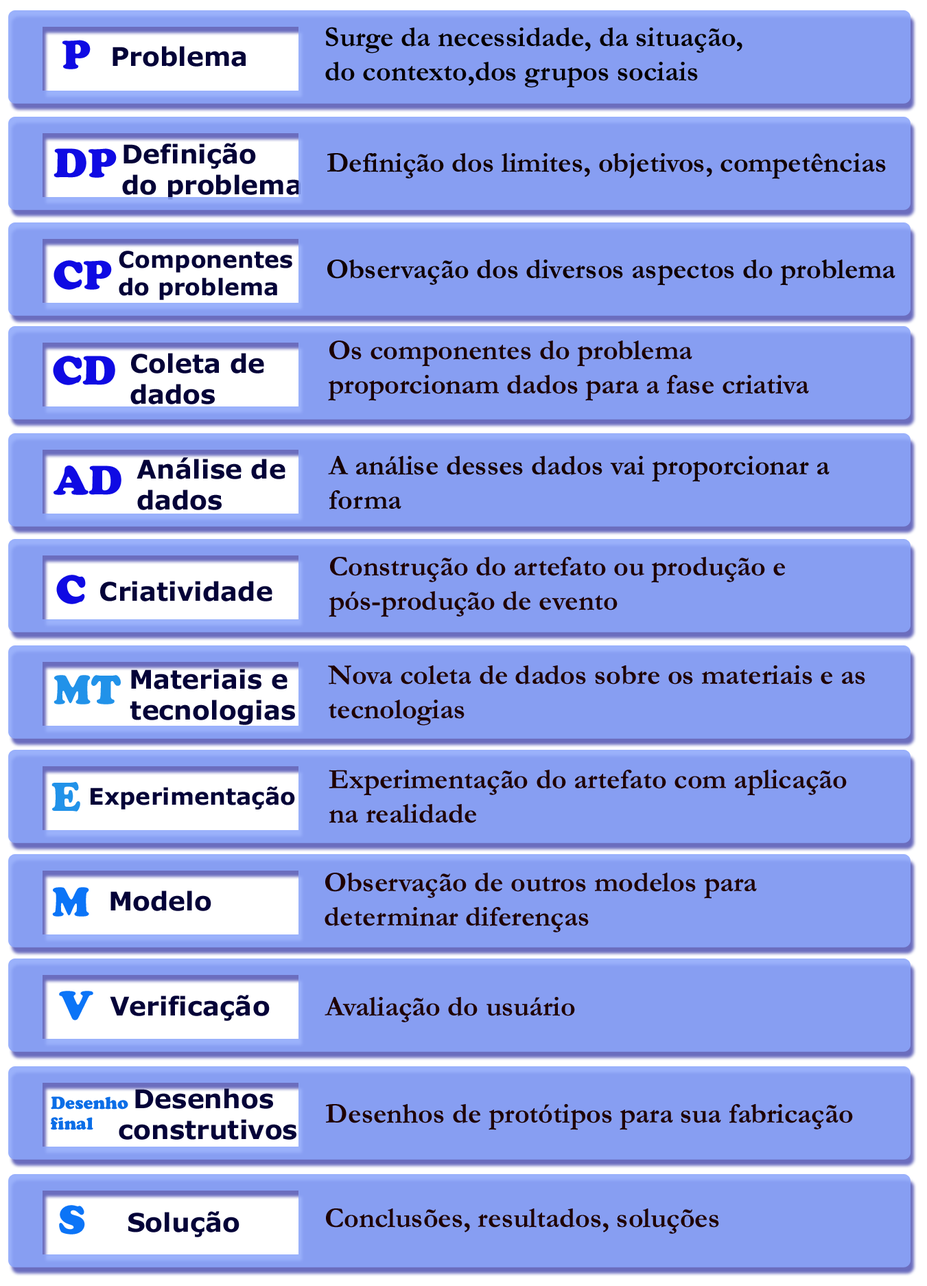
<style>
.page{position:relative;width:927px;height:1286px;background:#879ef2}
.page>*{position:absolute;margin:0}
.t1{font:28.6px "Garamond-Bold";color:#060000}
.t2{font:40px "CooperBlackStd";color:#0f0ae3}
.t3{font:25.7px "Verdana-Bold";color:#040238}
.t4{font:28.6px "Garamond-Bold";color:#120101}
.t5{font:22.9px "Verdana-Bold";color:#040238}
.t6{font:28.6px "Garamond-Bold";color:#100101}
.t7{font:28.6px "Garamond-Bold";color:#1c0101}
.t8{font:28.6px "Garamond-Bold";color:#160101}
.t9{font:28.6px "Garamond-Bold";color:#1f0202}
.t10{font:40px "CooperBlackStd";color:#2192e9}
.t11{font:40px "CooperBlackStd";color:#0b74f7}
.t12{font:17.2px "CooperBlackStd";color:#0b6ee7}
</style>
<div class="page">
<p class="t1" style="left:325px;top:27px;width:418px;height:61px">Surge da necessidade, da situação, <br>do contexto,dos grupos sociais</p>
<p class="t2" style="left:62px;top:40px;width:29px;height:29px">P</p>
<p class="t3" style="left:113px;top:46px;width:133px;height:21px">Problema</p>
<p class="t2" style="left:54px;top:148px;width:63px;height:30px">DP</p>
<p class="t3" style="left:122px;top:143px;width:179px;height:57px">Definição <br>do problema</p>
<p class="t4" style="left:327px;top:153px;width:559px;height:26px">Definição dos limites, objetivos, competências</p>
<p class="t5" style="left:119px;top:251px;width:173px;height:49px">Componentes <br>do problema</p>
<p class="t2" style="left:54px;top:260px;width:58px;height:30px">CP</p>
<p class="t6" style="left:327px;top:259px;width:569px;height:27px">Observação dos diversos aspectos do problema</p>
<p class="t7" style="left:328px;top:340px;width:481px;height:61px">Os componentes do problema <br>proporcionam dados para a fase criativa</p>
<p class="t3" style="left:130px;top:353px;width:134px;height:51px">Coleta de <br>dados</p>
<p class="t2" style="left:53px;top:356px;width:62px;height:29px">CD</p>
<p class="t3" style="left:137px;top:457px;width:149px;height:53px">Análise de <br>dados</p>
<p class="t8" style="left:328px;top:456px;width:502px;height:53px">A análise desses dados vai proporcionar a <br>forma</p>
<p class="t2" style="left:54px;top:465px;width:68px;height:30px">AD</p>
<p class="t9" style="left:329px;top:557px;width:456px;height:60px">Construção do artefato ou produção e <br>pós-produção de evento</p>
<p class="t2" style="left:56px;top:575px;width:30px;height:29px">C</p>
<p class="t3" style="left:100px;top:581px;width:173px;height:20px">Criatividade</p>
<p class="t9" style="left:328px;top:665px;width:538px;height:61px">Nova coleta de dados sobre os materiais e as <br>tecnologias</p>
<p class="t10" style="left:54px;top:675px;width:67px;height:29px">MT</p>
<p class="t3" style="left:130px;top:669px;width:165px;height:56px;text-align:center">Materiais e <br>tecnologias</p>
<p class="t9" style="left:329px;top:770px;width:518px;height:53px">Experimentação do artefato com aplicação <br>na realidade</p>
<p class="t10" style="left:51px;top:781px;width:29px;height:30px">E</p>
<p class="t5" style="left:91px;top:786px;width:204px;height:23px">Experimentação</p>
<p class="t9" style="left:325px;top:873px;width:432px;height:59px">Observação de outros modelos para <br>determinar diferenças</p>
<p class="t11" style="left:52px;top:887px;width:37px;height:29px">M</p>
<p class="t3" style="left:111px;top:890px;width:100px;height:21px">Modelo</p>
<p class="t11" style="left:59px;top:991px;width:34px;height:29px">V</p>
<p class="t3" style="left:110px;top:995px;width:160px;height:26px">Verificação</p>
<p class="t9" style="left:325px;top:997px;width:250px;height:25px">Avaliação do usuário</p>
<p class="t12" style="left:51px;top:1096px;width:77px;height:34px">Desenho <br>final</p>
<p class="t3" style="left:119px;top:1088px;width:178px;height:52px;text-align:center">Desenhos <br>construtivos</p>
<p class="t9" style="left:326px;top:1104px;width:527px;height:26px">Desenhos de protótipos para sua fabricação</p>
<p class="t11" style="left:59px;top:1205px;width:26px;height:29px">S</p>
<p class="t3" style="left:128px;top:1211px;width:112px;height:26px">Solução</p>
<p class="t9" style="left:326px;top:1208px;width:393px;height:26px">Conclusões, resultados, soluções</p>
</div>
